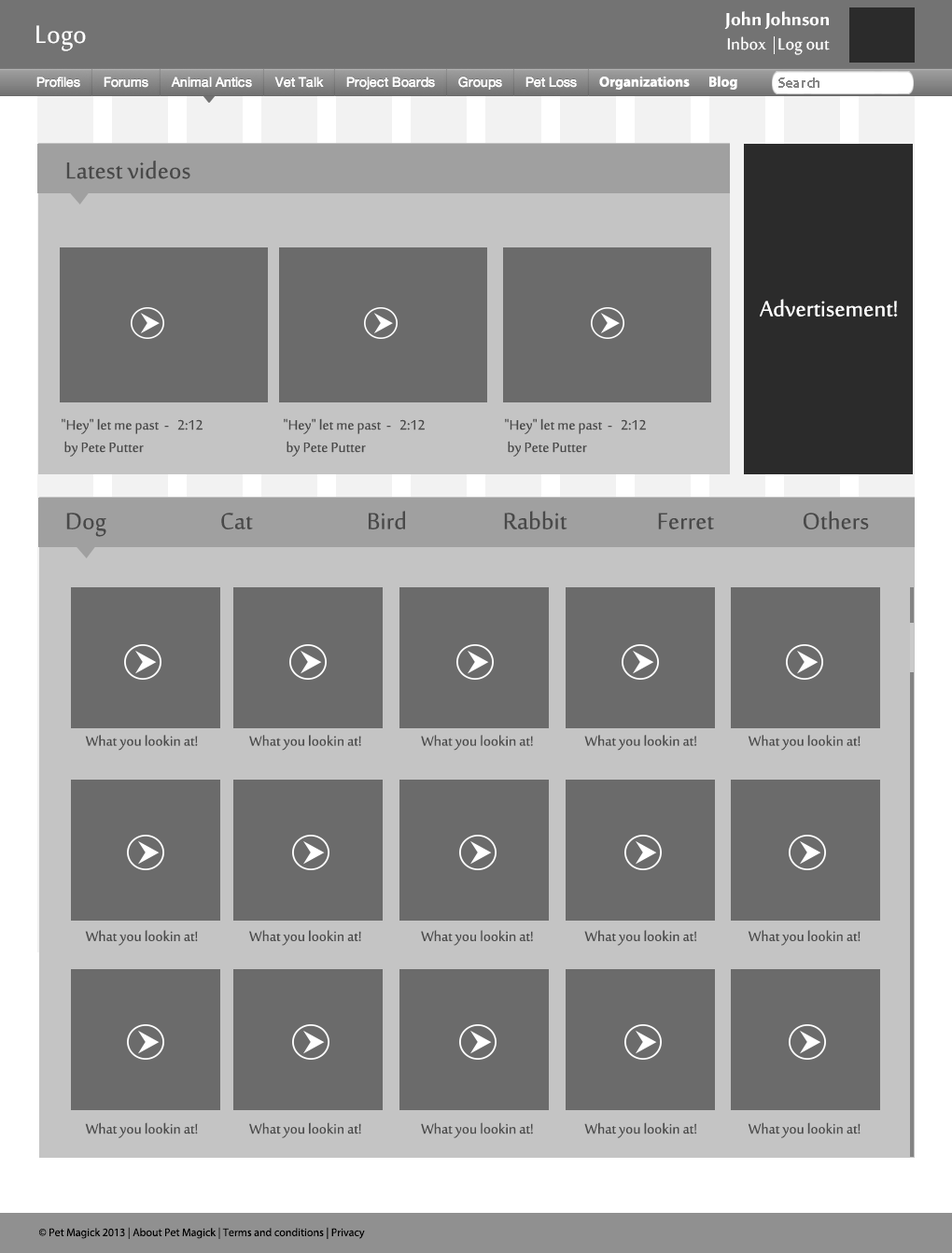
<style>
.page{position:relative;width:952px;height:1253px;background:#6b6b6b}
.page>*{position:absolute;margin:0}
.t1{font:24.2px "SakkalMajallaBold";color:#ffffff}
.t2{font:34.3px "SakkalMajalla";color:#ffffff}
.t3{font:22.5px "SakkalMajalla";color:#ffffff}
.t4{font:14.4px "MyriadPro-Bold";color:#ffffff}
.t5{font:14.4px "MyriadPro-Bold";color:#8b7d7d}
.t6{font:31.7px "SakkalMajalla";color:#504342}
.t7{font:29.7px "SakkalMajalla";color:#ffffff}
.t8{font:18.7px "SakkalMajalla";color:#504342}
.t9{font:18.7px "SakkalMajalla";color:#524747}
.t10{font:11.2px "MyriadPro-Regular";color:#000000}
</style>
<div class="page">
<p class="t1" style="left:724px;top:11px;width:105px;height:18px">John Johnson</p>
<p class="t2" style="left:36px;top:25px;width:50px;height:26px">Logo</p>
<p class="t3" style="left:727px;top:36px;width:39px;height:14px">Inbox</p>
<p class="t3" style="left:778px;top:37px;width:52px;height:18px">Log out</p>
<p class="t4" style="left:599px;top:76px;width:91px;height:14px">Organizations</p>
<p class="t4" style="left:709px;top:76px;width:28px;height:14px">Blog</p>
<p class="t5" style="left:778px;top:77px;width:41px;height:11px">Search</p>
<p class="t6" style="left:66px;top:161px;width:124px;height:18px">Latest videos</p>
<p class="t7" style="left:760px;top:299px;width:138px;height:18px">Advertisement!</p>
<p class="t8" style="left:62px;top:418px;width:141px;height:38px">"Hey" let me past  -   2:12<br> by Pete Putter</p>
<p class="t8" style="left:284px;top:418px;width:141px;height:38px">"Hey" let me past  -   2:12<br> by Pete Putter</p>
<p class="t8" style="left:505px;top:418px;width:141px;height:38px">"Hey" let me past  -   2:12<br> by Pete Putter</p>
<p class="t6" style="left:66px;top:512px;width:40px;height:25px">Dog</p>
<p class="t6" style="left:221px;top:512px;width:32px;height:17px">Cat</p>
<p class="t6" style="left:369px;top:511px;width:36px;height:18px">Bird</p>
<p class="t6" style="left:504px;top:511px;width:63px;height:18px">Rabbit</p>
<p class="t6" style="left:658px;top:512px;width:56px;height:17px">Ferret</p>
<p class="t6" style="left:804px;top:511px;width:65px;height:18px">Others</p>
<p class="t9" style="left:85px;top:735px;width:113px;height:15px">What you lookin at!</p>
<p class="t9" style="left:249px;top:735px;width:112px;height:15px">What you lookin at!</p>
<p class="t9" style="left:421px;top:735px;width:112px;height:15px">What you lookin at!</p>
<p class="t9" style="left:584px;top:735px;width:113px;height:15px">What you lookin at!</p>
<p class="t9" style="left:748px;top:735px;width:113px;height:15px">What you lookin at!</p>
<p class="t9" style="left:85px;top:930px;width:113px;height:15px">What you lookin at!</p>
<p class="t9" style="left:249px;top:930px;width:112px;height:15px">What you lookin at!</p>
<p class="t9" style="left:421px;top:930px;width:112px;height:15px">What you lookin at!</p>
<p class="t9" style="left:584px;top:930px;width:113px;height:15px">What you lookin at!</p>
<p class="t9" style="left:748px;top:930px;width:113px;height:15px">What you lookin at!</p>
<p class="t9" style="left:85px;top:1122px;width:113px;height:16px">What you lookin at!</p>
<p class="t9" style="left:249px;top:1122px;width:112px;height:16px">What you lookin at!</p>
<p class="t9" style="left:421px;top:1122px;width:112px;height:16px">What you lookin at!</p>
<p class="t9" style="left:584px;top:1122px;width:113px;height:16px">What you lookin at!</p>
<p class="t9" style="left:748px;top:1122px;width:113px;height:16px">What you lookin at!</p>
<p class="t10" style="left:39px;top:1226px;width:326px;height:13px">© Pet Magick 2013 | About Pet Magick | Terms and conditions | Privacy</p>
</div>
